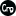
<style>
.page{position:relative;width:16px;height:16px;background:#000506}
.page>*{position:absolute;margin:0}
.t1{font:9px "SpringtimeDaydream";color:#ffffff;font-weight:bold}
</style>
<div class="page">
<p class="t1" style="left:2px;top:4px;width:12px;height:9px">Crg</p>
</div>
